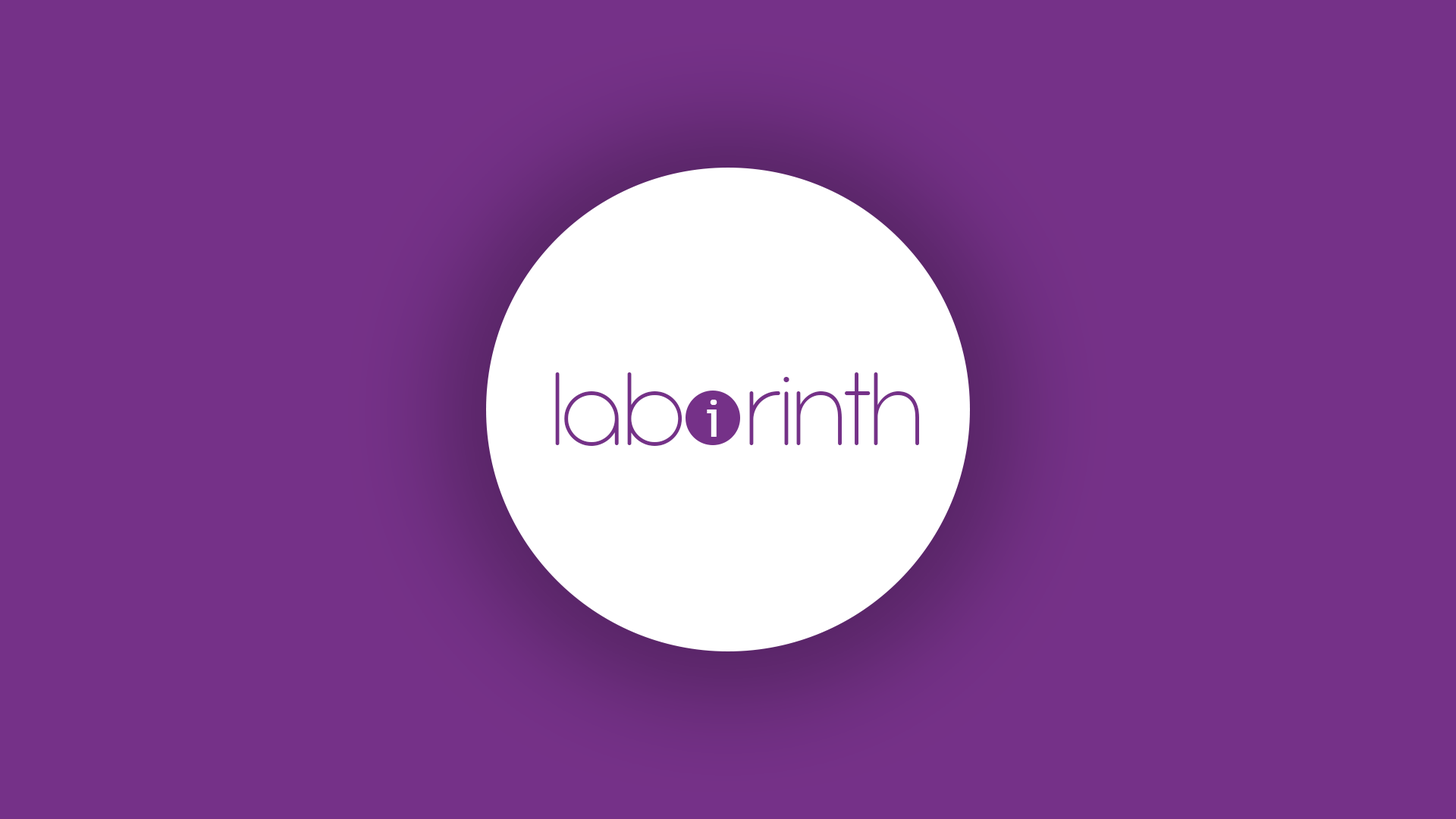
<style>
.page{position:relative;width:1456px;height:819px;background:#753188}
.page>*{position:absolute;margin:0}
.t1{font:113.7px "AntipastoPro-Extralight";letter-spacing:-0.025em;color:#753188}
.t2{font:50.6px "ArtifaktElement-Regular";letter-spacing:-0.025em;color:#ffffff;font-weight:bold}
</style>
<div class="page">
<p class="t1" style="left:555px;top:372px;width:127px;height:74px">lab</p>
<p class="t1" style="left:749px;top:372px;width:170px;height:73px">rinth</p>
<p class="t2" style="left:707px;top:400px;width:10px;height:37px">i</p>
</div>
